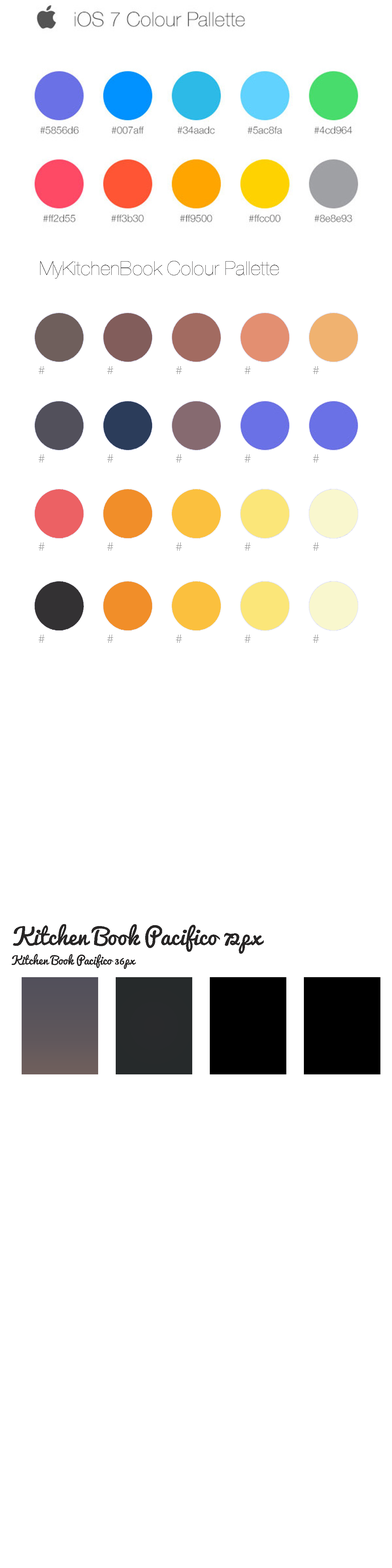
<style>
.page{position:relative;width:392px;height:1568px;background:#ffffff}
.page>*{position:absolute;margin:0}
.t1{font:19.6px "HelveticaNeue-UltraLight";color:#282626}
.t2{font:11.8px "HelveticaNeue-UltraLight";color:#626262}
.t3{font:22.6px "Pacifico-Regular";color:#282626}
.t4{font:11.3px "Pacifico-Regular";color:#282626}
</style>
<div class="page">
<p class="t1" style="left:40px;top:261px;width:239px;height:17px">MyKitchenBook Colour Pallette</p>
<p class="t2" style="left:39px;top:366px;width:6px;height:8px">#</p>
<p class="t2" style="left:107px;top:366px;width:6px;height:8px">#</p>
<p class="t2" style="left:176px;top:366px;width:6px;height:8px">#</p>
<p class="t2" style="left:245px;top:366px;width:6px;height:8px">#</p>
<p class="t2" style="left:313px;top:366px;width:6px;height:8px">#</p>
<p class="t2" style="left:39px;top:454px;width:6px;height:9px">#</p>
<p class="t2" style="left:107px;top:454px;width:6px;height:9px">#</p>
<p class="t2" style="left:176px;top:454px;width:6px;height:9px">#</p>
<p class="t2" style="left:245px;top:454px;width:6px;height:9px">#</p>
<p class="t2" style="left:313px;top:454px;width:6px;height:9px">#</p>
<p class="t2" style="left:39px;top:543px;width:6px;height:8px">#</p>
<p class="t2" style="left:107px;top:543px;width:6px;height:8px">#</p>
<p class="t2" style="left:176px;top:543px;width:6px;height:8px">#</p>
<p class="t2" style="left:245px;top:543px;width:6px;height:8px">#</p>
<p class="t2" style="left:313px;top:543px;width:6px;height:8px">#</p>
<p class="t2" style="left:39px;top:635px;width:6px;height:8px">#</p>
<p class="t2" style="left:107px;top:635px;width:6px;height:8px">#</p>
<p class="t2" style="left:176px;top:635px;width:6px;height:8px">#</p>
<p class="t2" style="left:245px;top:635px;width:6px;height:8px">#</p>
<p class="t2" style="left:313px;top:635px;width:6px;height:8px">#</p>
<p class="t3" style="left:13px;top:924px;width:251px;height:30px">Kitchen Book Pacifico 72px</p>
<p class="t4" style="left:12px;top:954px;width:124px;height:15px">Kitchen Book Pacifico 36px</p>
</div>
